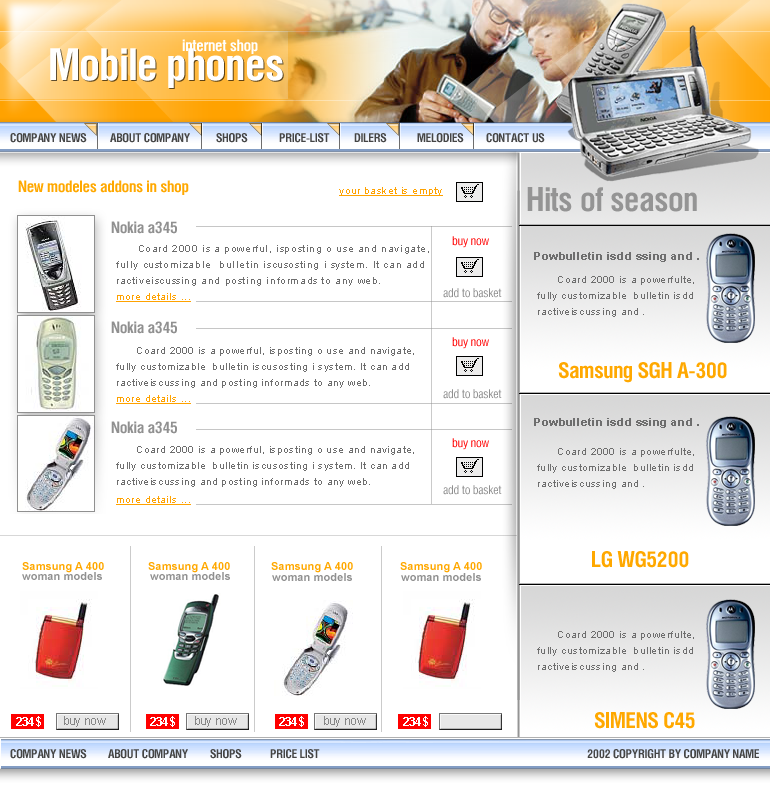
<style>
.page{position:relative;width:770px;height:800px;background:#ffffff}
.page>*{position:absolute;margin:0}
.t1{font:16px "HeliosCond-Bold";letter-spacing:-0.02em;color:#ffffff}
.t2{font:44px "HeliosCond-Bold";letter-spacing:-0.02em;color:#ffffff}
.t3{font:12px "HeliosCond-Bold";letter-spacing:-0.02em;color:#454545}
.t4{font:16px "HeliosCond-Bold";letter-spacing:-0.02em;color:#ffa800}
.t5{font:10px "ArialMT";letter-spacing:0.06em;color:#ffa200;text-decoration:underline}
.t6{font:33px "HeliosCond-Bold";letter-spacing:-0.02em;color:#949494}
.t7{font:16px "HeliosCond-Bold";letter-spacing:-0.02em;color:#909090}
.t8{font:10px/16px "ArialMT";letter-spacing:0.06em;color:#6e6e6e}
.t9{font:12px "HeliosCond";letter-spacing:-0.02em;color:#ff0000}
.t10{font:11px "Arial-BoldMT";letter-spacing:0.06em;color:#6e6e6e}
.t11{font:12px "HeliosCond";letter-spacing:-0.02em;color:#909090}
.t12{font:22px "HeliosCond-Bold";letter-spacing:-0.02em;color:#ffa800}
.t13{font:11px "Arial-BoldMT";letter-spacing:0.01em;color:#ffa800}
.t14{font:11px "Arial-BoldMT";letter-spacing:0.01em;color:#909090}
.t15{font:11px "Arial-BoldMT";letter-spacing:0.01em;color:#ffffff}
.t16{font:11px "ArialMT";letter-spacing:0.01em;color:#868686}
</style>
<div class="page">
<p class="t1" style="left:182px;top:39px;width:76px;height:15px">internet shop</p>
<p class="t2" style="left:50px;top:48px;width:233px;height:40px">Mobile phones</p>
<p class="t2" style="left:51px;top:49px;width:233px;height:40px">Mobile phones</p>
<p class="t3" style="left:10px;top:133px;width:77px;height:10px">COMPANY NEWS</p>
<p class="t3" style="left:110px;top:133px;width:80px;height:10px">ABOUT COMPANY</p>
<p class="t3" style="left:216px;top:133px;width:32px;height:10px">SHOPS</p>
<p class="t3" style="left:354px;top:133px;width:33px;height:10px">DILERS</p>
<p class="t3" style="left:417px;top:133px;width:47px;height:10px">MELODIES</p>
<p class="t3" style="left:486px;top:133px;width:59px;height:10px">CONTACT US</p>
<p class="t4" style="left:18px;top:180px;width:171px;height:15px">New modeles addons in shop</p>
<p class="t5" style="left:339px;top:187px;width:104px;height:9px">your basket is empty</p>
<p class="t6" style="left:527px;top:187px;width:170px;height:25px">Hits of season</p>
<p class="t7" style="left:111px;top:221px;width:66px;height:13px">Nokia a345</p>
<p class="t8" style="left:116px;top:245px;width:313px;height:41px">Coard 2000 is a powerful, isposting o use and navigate, <br>fully customizable  bulletin iscusosting i system. It can add <br>ractiveiscussing and posting informads to any web.</p>
<p class="t9" style="left:452px;top:236px;width:37px;height:12px">buy now</p>
<p class="t10" style="left:534px;top:252px;width:165px;height:10px">Powbulletin isdd ssing and .</p>
<p class="t8" style="left:537px;top:276px;width:157px;height:41px">Coard 2000 is a powerfulte, <br>fully customizable  bulletin isdd <br>ractiveiscussing and .</p>
<p class="t5" style="left:116px;top:293px;width:75px;height:9px">more details ...</p>
<p class="t11" style="left:443px;top:288px;width:59px;height:10px">add to basket</p>
<p class="t7" style="left:111px;top:321px;width:66px;height:13px">Nokia a345</p>
<p class="t9" style="left:452px;top:337px;width:37px;height:12px">buy now</p>
<p class="t8" style="left:116px;top:347px;width:298px;height:41px">Coard 2000 is a powerful, isposting o use and navigate, <br>fully customizable  bulletin iscusosting i system. It can add <br>ractiveiscussing and posting informads to any web.</p>
<p class="t11" style="left:443px;top:389px;width:59px;height:10px">add to basket</p>
<p class="t5" style="left:116px;top:395px;width:75px;height:9px">more details ...</p>
<p class="t7" style="left:111px;top:421px;width:66px;height:13px">Nokia a345</p>
<p class="t10" style="left:534px;top:418px;width:165px;height:10px">Powbulletin isdd ssing and .</p>
<p class="t9" style="left:452px;top:438px;width:37px;height:12px">buy now</p>
<p class="t8" style="left:116px;top:446px;width:298px;height:41px">Coard 2000 is a powerful, isposting o use and navigate, <br>fully customizable  bulletin iscusosting i system. It can add <br>ractiveiscussing and posting informads to any web.</p>
<p class="t8" style="left:537px;top:448px;width:157px;height:41px">Coard 2000 is a powerfulte, <br>fully customizable  bulletin isdd <br>ractiveiscussing and .</p>
<p class="t11" style="left:443px;top:485px;width:59px;height:10px">add to basket</p>
<p class="t5" style="left:116px;top:496px;width:75px;height:9px">more details ...</p>
<p class="t12" style="left:592px;top:551px;width:97px;height:17px">LG WG5200</p>
<p class="t13" style="left:22px;top:562px;width:82px;height:11px">Samsung A 400</p>
<p class="t13" style="left:148px;top:562px;width:82px;height:11px">Samsung A 400</p>
<p class="t13" style="left:271px;top:562px;width:82px;height:11px">Samsung A 400</p>
<p class="t13" style="left:400px;top:562px;width:82px;height:11px">Samsung A 400</p>
<p class="t14" style="left:22px;top:572px;width:80px;height:8px">woman models</p>
<p class="t14" style="left:150px;top:572px;width:80px;height:8px">woman models</p>
<p class="t14" style="left:272px;top:573px;width:80px;height:8px">woman models</p>
<p class="t14" style="left:401px;top:573px;width:80px;height:8px">woman models</p>
<p class="t8" style="left:537px;top:631px;width:157px;height:41px">Coard 2000 is a powerfulte, <br>fully customizable  bulletin isdd <br>ractiveiscussing and .</p>
<p class="t12" style="left:594px;top:712px;width:101px;height:17px">SIMENS C45</p>
<p class="t15" style="left:16px;top:716px;width:25px;height:11px">234$</p>
<p class="t16" style="left:64px;top:716px;width:42px;height:11px">buy now</p>
<p class="t15" style="left:150px;top:716px;width:25px;height:11px">234$</p>
<p class="t16" style="left:195px;top:716px;width:42px;height:11px">buy now</p>
<p class="t15" style="left:279px;top:716px;width:25px;height:11px">234$</p>
<p class="t16" style="left:324px;top:716px;width:42px;height:11px">buy now</p>
<p class="t3" style="left:10px;top:749px;width:77px;height:10px">COMPANY NEWS</p>
<p class="t3" style="left:108px;top:749px;width:80px;height:10px">ABOUT COMPANY</p>
<p class="t3" style="left:210px;top:749px;width:32px;height:10px">SHOPS</p>
<p class="t3" style="left:270px;top:749px;width:50px;height:10px">PRICE LIST</p>
<p class="t3" style="left:587px;top:749px;width:172px;height:10px">2002 COPYRIGHT BY COMPANY NAME</p>
</div>
